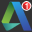
<style>
.page{position:relative;width:32px;height:32px;background:#333333}
.page>*{position:absolute;margin:0}
.t1{font:8px "ArialMT"}
</style>
<div class="page">
<p class="t1" style="left:25px;top:3px;width:3px;height:6px">1</p>
</div>
